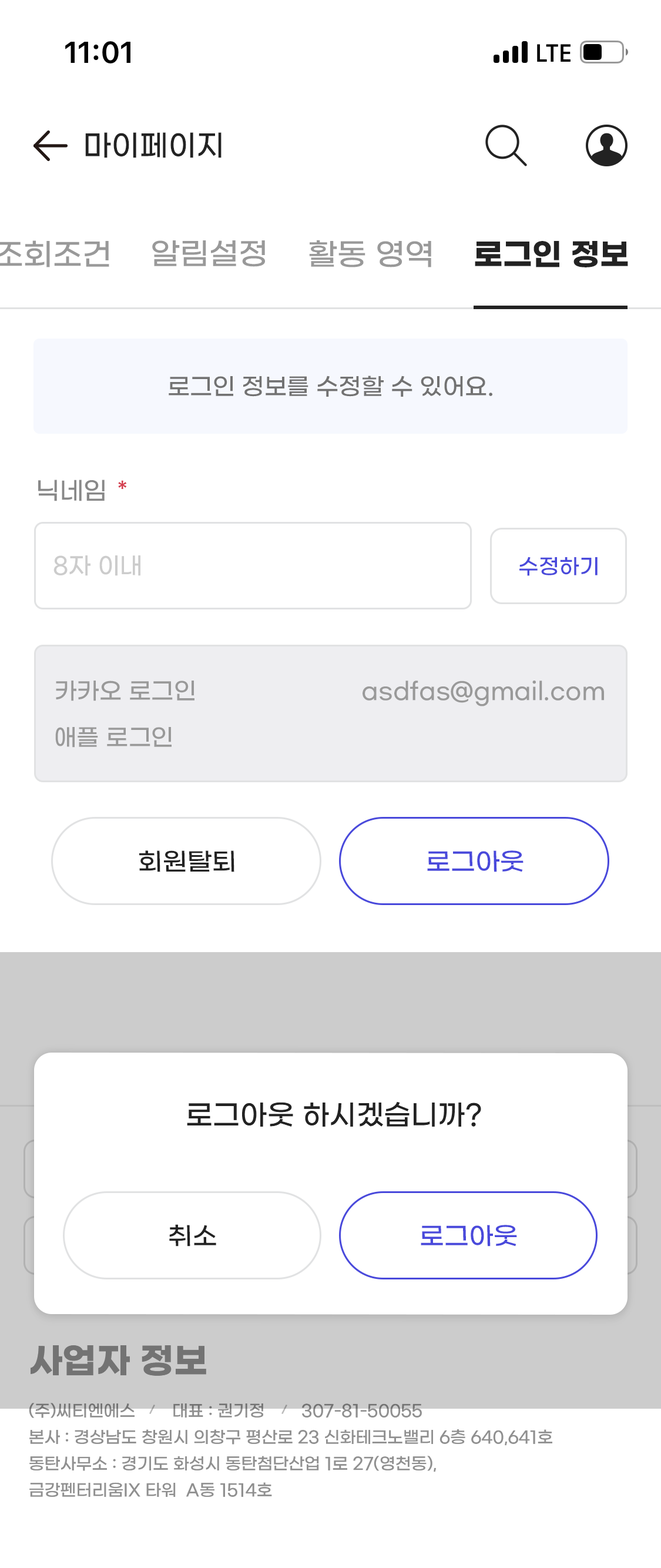
<style>
.page{position:relative;width:661px;height:1568px;background:#ffffff}
.page>*{position:absolute;margin:0}
.t1{font:29.4px "GmarketSansMedium";color:#222222}
.t2{font:30.6px "GmarketSansMedium";color:#999999}
.t3{font:30.6px "GmarketSansBold";color:#222222}
.t4{font:23.5px "GmarketSansMedium";color:#727272}
.t5{font:24.7px "GmarketSansMedium";color:#888888}
.t6{font:23.5px "GmarketSansMedium";color:#d43d4e}
.t7{font:23.5px "GmarketSansMedium";color:#cccccc}
.t8{font:21.2px "GmarketSansMedium";color:#4949db}
.t9{font:23.5px "GmarketSansMedium";color:#999999}
.t10{font:24.7px "GmarketSansMedium";color:#222222;scale:1.04 1}
.t11{font:24.7px "GmarketSansMedium";color:#4949db;scale:1.04 1}
.t12{font:28.2px "GmarketSansMedium";color:#222222}
.t13{font:35.3px "GmarketSansBold";color:#737373}
.t14{font:16.5px/26.4px "GmarketSansMedium";color:#909090}
</style>
<div class="page">
<p class="t1" style="left:85px;top:132px;width:137px;height:26px">마이페이지</p>
<p class="t2" style="left:152px;top:240px;width:113px;height:27px">알림설정</p>
<p class="t2" style="left:309px;top:240px;width:122px;height:27px">활동 영역</p>
<p class="t3" style="left:475px;top:241px;width:153px;height:26px">로그인 정보</p>
<p class="t4" style="left:169px;top:376px;width:323px;height:21px">로그인 정보를 수정할 수 있어요.</p>
<p class="t5" style="left:38px;top:480px;width:67px;height:21px">닉네임</p>
<p class="t6" style="left:118px;top:480px;width:9px;height:10px">*</p>
<p class="t7" style="left:53px;top:555px;width:87px;height:21px">8자 이내</p>
<p class="t8" style="left:520px;top:557px;width:78px;height:19px">수정하기</p>
<p class="t9" style="left:56px;top:681px;width:139px;height:20px">카카오 로그인</p>
<p class="t9" style="left:363px;top:681px;width:241px;height:25px">asdfas@gmail.com</p>
<p class="t9" style="left:55px;top:727px;width:117px;height:21px">애플 로그인</p>
<p class="t10" style="left:139px;top:850px;width:95px;height:22px">회원탈퇴</p>
<p class="t11" style="left:427px;top:850px;width:97px;height:22px">로그아웃</p>
<p class="t12" style="left:187px;top:1102px;width:294px;height:25px">로그아웃 하시겠습니까?</p>
<p class="t10" style="left:169px;top:1224px;width:47px;height:23px">취소</p>
<p class="t11" style="left:421px;top:1225px;width:96px;height:22px">로그아웃</p>
<p class="t13" style="left:31px;top:1345px;width:175px;height:31px">사업자 정보</p>
<p class="t14" style="left:29px;top:1403px;width:523px;height:94px">(주)씨티엔에스        대표 : 권기정        307-81-50055<br>본사 : 경상남도 창원시 의창구 평산로 23 신화테크노밸리 6층 640,641호<br>동탄사무소 : 경기도 화성시 동탄첨단산업 1로 27(영천동),<br>금강펜터리움IX 타워  A동 1514호</p>
</div>
